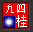
<style>
.page{position:relative;width:33px;height:32px;background:#f20000}
.page>*{position:absolute;margin:0}
.t1{font:10.4px "SimSun";color:#ffffff}
.t2{font:11.7px "SimSun";color:#ffffff}
</style>
<div class="page">
<p class="t1" style="left:6px;top:4px;width:19px;height:9px">九四</p>
<p class="t2" style="left:16px;top:15px;width:11px;height:12px">桂</p>
</div>
